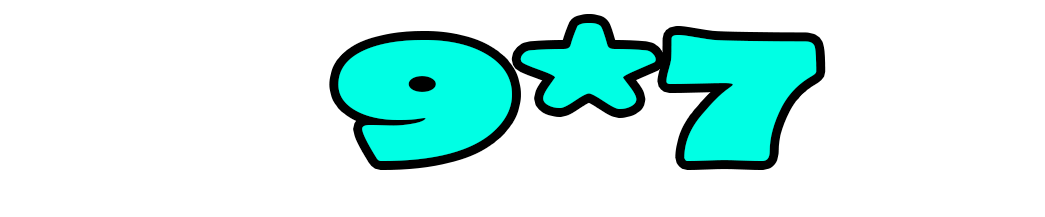
<style>
.page{position:relative;width:1045px;height:217px;background:#ffffff}
.page>*{position:absolute;margin:0}
.t1{font:195.3px "BerlinSansFB-Bold";color:#00ffe4;scale:1.55 1}
</style>
<div class="page">
<p class="t1" style="left:338px;top:23px;width:479px;height:138px">9*7</p>
</div>
